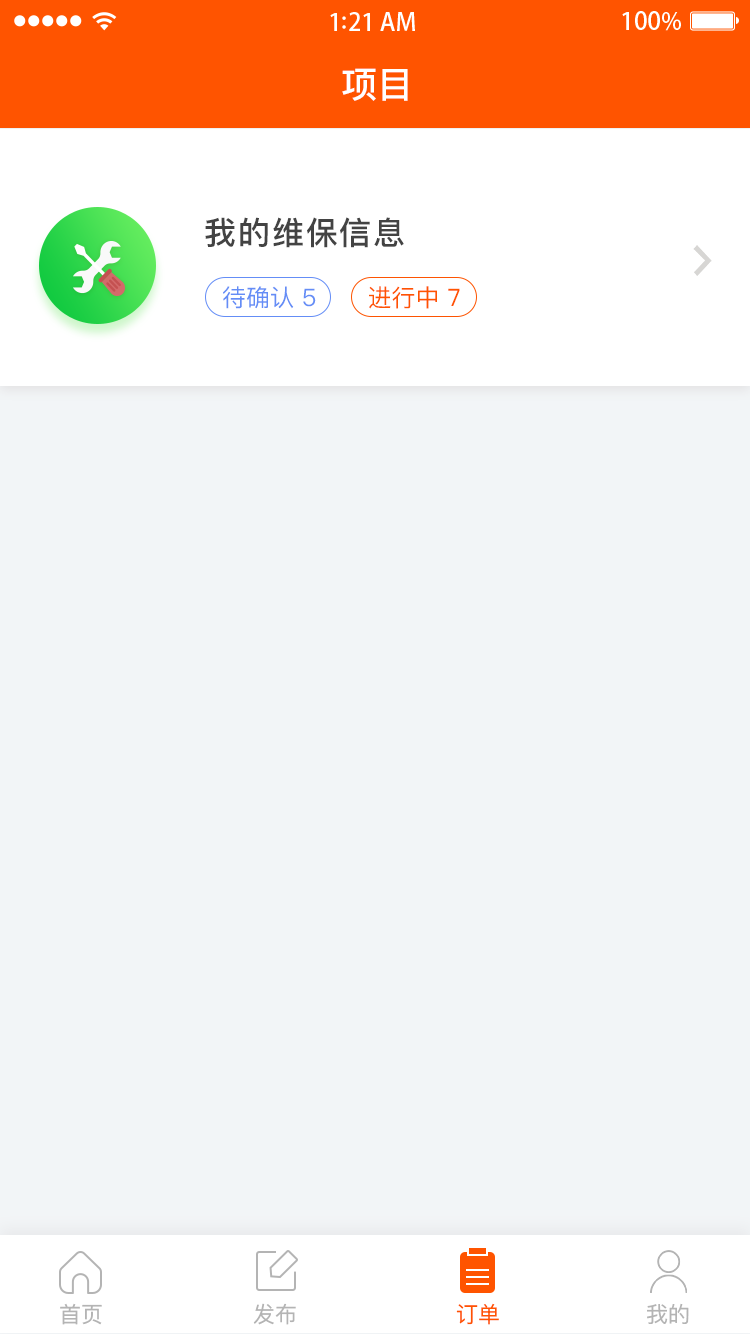
<style>
.page{position:relative;width:750px;height:1334px;background:#f2f5f7}
.page>*{position:absolute;margin:0}
.t1{font:36px "PingFangSC-Medium";color:#ffffff}
.t2{font:32px "PingFangSC-Medium";letter-spacing:0.06em;color:#434343}
.t3{font:24px "PingFangSC-Regular";color:#648df6}
.t4{font:24px "PingFangSC-Regular";color:#ff5400}
.t5{font:22px "PingFangSC-Regular";color:#b4b4b4}
.t6{font:22px "PingFangSC-Regular";color:#ff5400}
</style>
<div class="page">
<p class="t1" style="left:342px;top:68px;width:66px;height:33px">项目</p>
<p class="t2" style="left:205px;top:217px;width:199px;height:31px">我的维保信息</p>
<p class="t3" style="left:223px;top:286px;width:93px;height:23px">待确认 5</p>
<p class="t4" style="left:369px;top:286px;width:91px;height:23px">进行中 7</p>
<p class="t5" style="left:60px;top:1303px;width:42px;height:22px">首页</p>
<p class="t5" style="left:253px;top:1303px;width:43px;height:22px">发布</p>
<p class="t6" style="left:456px;top:1303px;width:43px;height:22px">订单</p>
<p class="t5" style="left:647px;top:1303px;width:42px;height:21px">我的</p>
</div>
